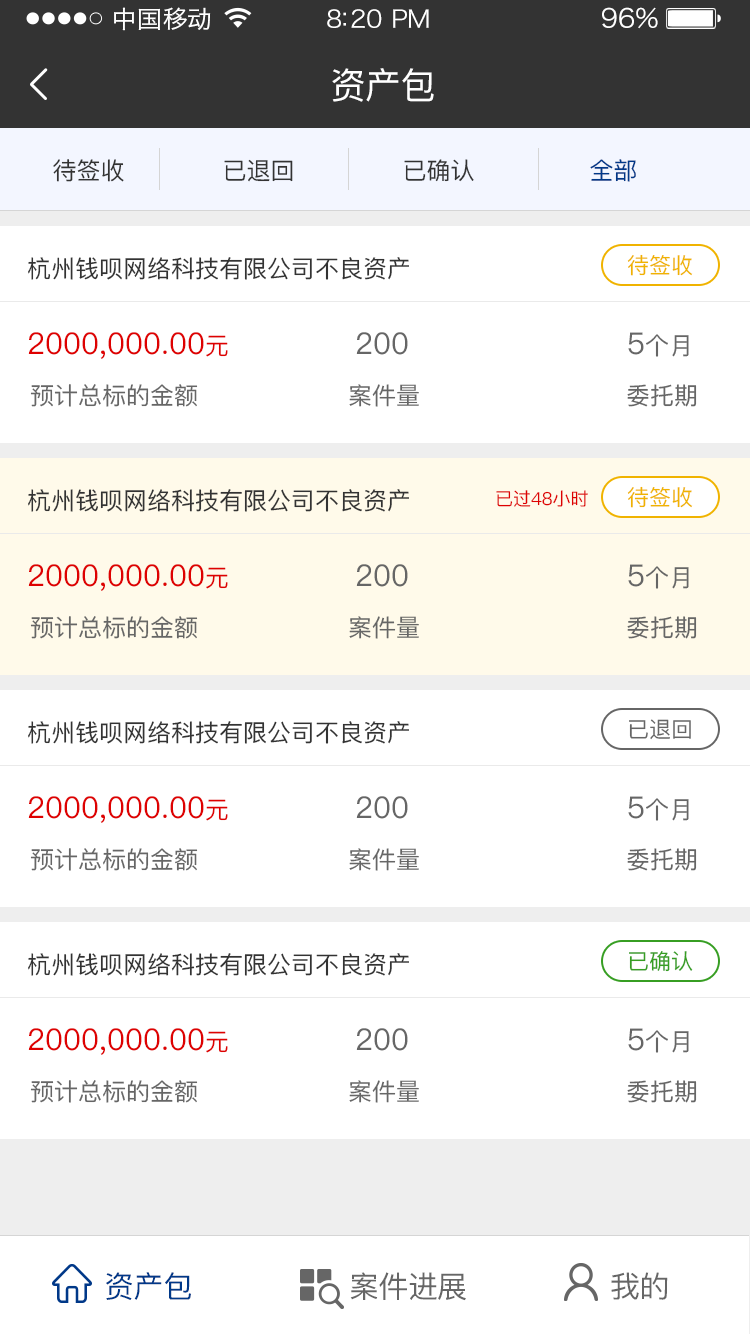
<style>
.page{position:relative;width:750px;height:1334px;background:#ffffff}
.page>*{position:absolute;margin:0}
.t1{font:24px "HiraginoSansGB-W3";letter-spacing:0.02em;color:#ffffff;scale:1.03 1}
.t2{font:24px "HiraginoSansGB-W3";letter-spacing:-0.02em;color:#ffffff;scale:1.03 1}
.t3{font:26.2px "HiraginoSansGB-W3";letter-spacing:-0.02em;color:#ffffff;scale:1.03 1}
.t4{font:36px "PingFang-SC-Medium";letter-spacing:-0.02em;color:#ffffff}
.t5{font:24px "PingFang-SC-Medium";color:#333333}
.t6{font:24px "PingFang-SC-Medium";color:#003888}
.t7{font:22px "PingFang-SC-Medium";color:#f0b300}
.t8{font:30px "PingFang-SC-Medium";color:#de0101}
.t9{font:24px "PingFang-SC-Medium";color:#de0101}
.t10{font:30px "PingFang-SC-Medium";color:#666666}
.t11{font:24px "PingFang-SC-Medium";color:#666666}
.t12{font:18px "PingFang-SC-Medium";color:#de0101}
.t13{font:22px "PingFang-SC-Medium";color:#666666}
.t14{font:22px "PingFang-SC-Medium";color:#379e23}
.t15{font:30px "PingFang-SC-Medium";letter-spacing:-0.02em;color:#003888}
.t16{font:30px "PingFang-SC-Medium";letter-spacing:-0.02em;color:#666666}
</style>
<div class="page">
<p class="t1" style="left:114px;top:7px;width:97px;height:24px">中国移动</p>
<p class="t2" style="left:327px;top:9px;width:102px;height:19px">8:20 PM</p>
<p class="t3" style="left:602px;top:7px;width:56px;height:22px">96%</p>
<p class="t4" style="left:332px;top:68px;width:102px;height:34px">资产包</p>
<p class="t5" style="left:53px;top:159px;width:71px;height:23px">待签收</p>
<p class="t5" style="left:224px;top:159px;width:69px;height:23px">已退回</p>
<p class="t5" style="left:404px;top:159px;width:70px;height:23px">已确认</p>
<p class="t6" style="left:590px;top:159px;width:46px;height:23px">全部</p>
<p class="t5" style="left:28px;top:257px;width:381px;height:23px">杭州钱呗网络科技有限公司不良资产</p>
<p class="t7" style="left:627px;top:254px;width:66px;height:22px">待签收</p>
<p class="t8" style="left:28px;top:332px;width:200px;height:27px">2000,000.00<span class="t9">元</span></p>
<p class="t10" style="left:356px;top:332px;width:52px;height:23px">200</p>
<p class="t11" style="left:628px;top:332px;width:61px;height:25px"><span class="t10">5</span>个月</p>
<p class="t11" style="left:30px;top:384px;width:168px;height:23px">预计总标的金额</p>
<p class="t11" style="left:349px;top:384px;width:70px;height:23px">案件量</p>
<p class="t11" style="left:627px;top:384px;width:70px;height:23px">委托期</p>
<p class="t7" style="left:627px;top:486px;width:66px;height:22px">待签收</p>
<p class="t5" style="left:28px;top:489px;width:381px;height:23px">杭州钱呗网络科技有限公司不良资产</p>
<p class="t12" style="left:496px;top:490px;width:92px;height:17px">已过48小时</p>
<p class="t8" style="left:28px;top:564px;width:200px;height:27px">2000,000.00<span class="t9">元</span></p>
<p class="t10" style="left:356px;top:564px;width:52px;height:23px">200</p>
<p class="t11" style="left:628px;top:564px;width:61px;height:25px"><span class="t10">5</span>个月</p>
<p class="t11" style="left:30px;top:616px;width:168px;height:23px">预计总标的金额</p>
<p class="t11" style="left:349px;top:616px;width:70px;height:23px">案件量</p>
<p class="t11" style="left:627px;top:616px;width:70px;height:23px">委托期</p>
<p class="t5" style="left:28px;top:721px;width:381px;height:23px">杭州钱呗网络科技有限公司不良资产</p>
<p class="t13" style="left:629px;top:719px;width:62px;height:21px">已退回</p>
<p class="t8" style="left:28px;top:796px;width:200px;height:27px">2000,000.00<span class="t9">元</span></p>
<p class="t10" style="left:356px;top:796px;width:52px;height:23px">200</p>
<p class="t11" style="left:628px;top:796px;width:61px;height:25px"><span class="t10">5</span>个月</p>
<p class="t11" style="left:30px;top:848px;width:168px;height:23px">预计总标的金额</p>
<p class="t11" style="left:349px;top:848px;width:70px;height:23px">案件量</p>
<p class="t11" style="left:627px;top:848px;width:70px;height:23px">委托期</p>
<p class="t5" style="left:28px;top:953px;width:381px;height:23px">杭州钱呗网络科技有限公司不良资产</p>
<p class="t14" style="left:629px;top:951px;width:64px;height:21px">已确认</p>
<p class="t8" style="left:28px;top:1028px;width:200px;height:27px">2000,000.00<span class="t9">元</span></p>
<p class="t10" style="left:356px;top:1028px;width:52px;height:23px">200</p>
<p class="t11" style="left:628px;top:1028px;width:61px;height:25px"><span class="t10">5</span>个月</p>
<p class="t11" style="left:30px;top:1080px;width:168px;height:23px">预计总标的金额</p>
<p class="t11" style="left:349px;top:1080px;width:70px;height:23px">案件量</p>
<p class="t11" style="left:627px;top:1080px;width:70px;height:23px">委托期</p>
<p class="t15" style="left:106px;top:1272px;width:85px;height:28px">资产包</p>
<p class="t16" style="left:350px;top:1272px;width:116px;height:29px">案件进展</p>
<p class="t16" style="left:611px;top:1272px;width:57px;height:28px">我的</p>
</div>
